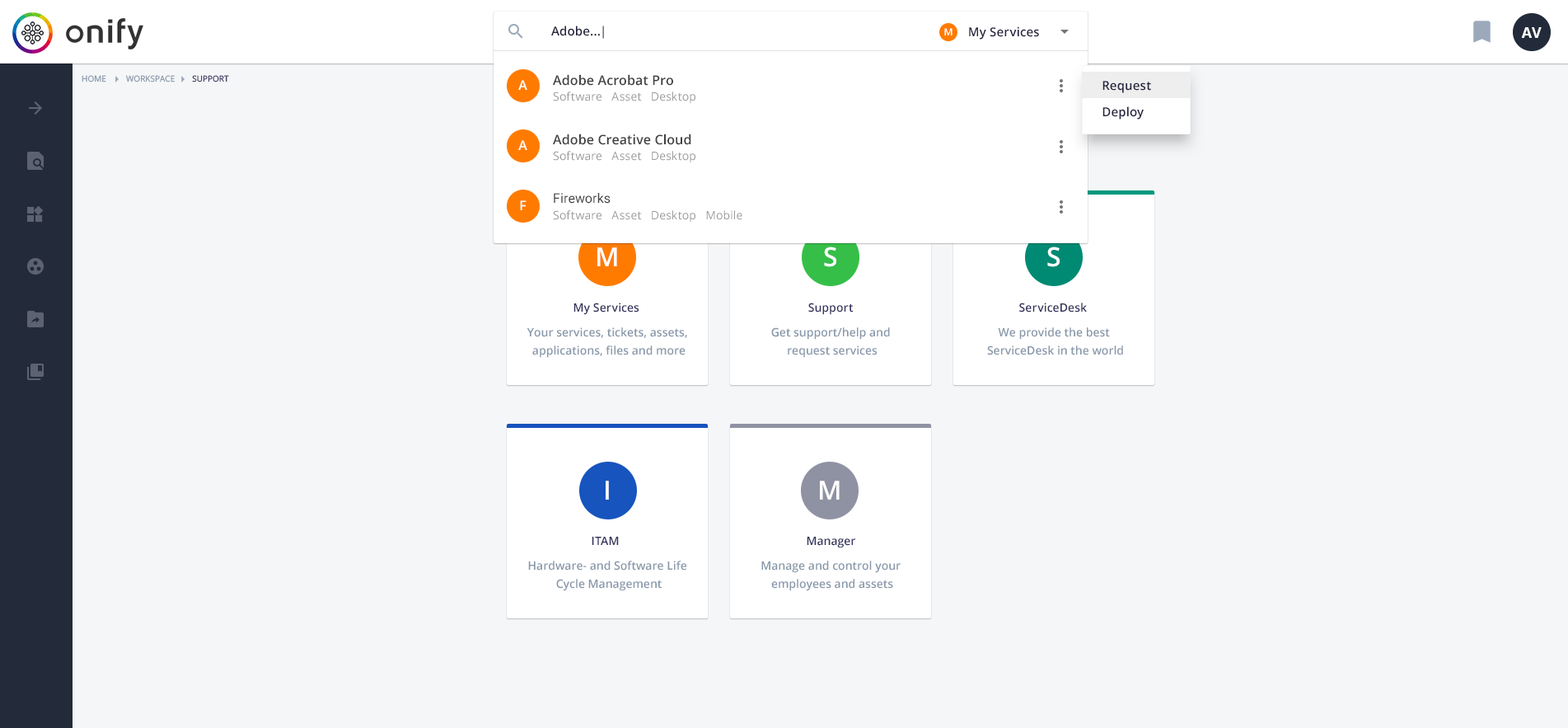
<style>
.page{position:relative;width:1568px;height:728px;background:#f5f6f8}
.page>*{position:absolute;margin:0}
.t1{font:12.4px "OpenSans-Semibold";letter-spacing:0.01em;color:#23233d}
.t2{font:9.9px "OpenSans-Semibold";letter-spacing:0.01em;color:#ffffff}
.t3{font:14.8px "OpenSans-Bold";color:#ffffff;text-transform:uppercase}
.t4{font:8.2px "OpenSans";color:#8898aa;text-transform:uppercase}
.t5{font:8.2px "OpenSans";color:#32325d;text-transform:uppercase}
.t6{font:13.2px "OpenSans-Semibold";letter-spacing:0.01em;color:#404040}
.t7{font:13.2px "OpenSans-Semibold";letter-spacing:0.01em;color:#ffffff}
.t8{font:11.5px "OpenSans";letter-spacing:0.01em;color:#9a9a9a}
.t9{font:13.2px "Roboto-Regular";letter-spacing:0.01em;color:#404040}
.t10{font:26.4px "OpenSans-Semibold";letter-spacing:0.005em;color:#ffffff}
.t11{font:11.5px "OpenSans-Semibold";letter-spacing:0.005em;color:#32325d}
.t12{font:11.5px/18.1px "OpenSans-Semibold";color:#8898aa}
</style>
<div class="page">
<p class="t1" style="left:551px;top:26px;width:53px;height:13px">Adobe...|</p>
<p class="t2" style="left:944px;top:28px;width:9px;height:7px">M</p>
<p class="t2" style="left:944px;top:28px;width:9px;height:7px">M</p>
<p class="t1" style="left:969px;top:26px;width:70px;height:14px">My Services</p>
<p class="t1" style="left:969px;top:26px;width:70px;height:14px">My Services</p>
<p class="t3" style="left:1521px;top:27px;width:21px;height:11px">AV</p>
<p class="t4" style="left:82px;top:75px;width:24px;height:7px">Home</p>
<p class="t4" style="left:126px;top:75px;width:49px;height:7px">Workspace</p>
<p class="t5" style="left:192px;top:75px;width:37px;height:7px">Support</p>
<p class="t6" style="left:553px;top:74px;width:120px;height:12px">Adobe Acrobat Pro</p>
<p class="t7" style="left:518px;top:80px;width:9px;height:10px">A</p>
<p class="t1" style="left:1102px;top:81px;width:49px;height:12px">Request</p>
<p class="t8" style="left:553px;top:91px;width:142px;height:13px">Software   Asset   Desktop</p>
<p class="t1" style="left:1102px;top:106px;width:42px;height:13px">Deploy</p>
<p class="t6" style="left:553px;top:133px;width:138px;height:12px">Adobe Creative Cloud</p>
<p class="t7" style="left:518px;top:140px;width:9px;height:10px">A</p>
<p class="t8" style="left:553px;top:151px;width:142px;height:12px">Software   Asset   Desktop</p>
<p class="t9" style="left:554px;top:193px;width:57px;height:11px">Fireworks</p>
<p class="t7" style="left:520px;top:200px;width:7px;height:10px">F</p>
<p class="t8" style="left:553px;top:210px;width:189px;height:12px">Software   Asset   Desktop   Mobile</p>
<p class="t10" style="left:597px;top:247px;width:20px;height:19px">M</p>
<p class="t10" style="left:824px;top:246px;width:12px;height:21px">S</p>
<p class="t10" style="left:1047px;top:246px;width:13px;height:21px">S</p>
<p class="t11" style="left:573px;top:302px;width:66px;height:13px">My Services</p>
<p class="t11" style="left:808px;top:302px;width:46px;height:13px">Support</p>
<p class="t11" style="left:1019px;top:302px;width:68px;height:10px">ServiceDesk</p>
<p class="t12" style="left:527px;top:327px;width:160px;height:31px;text-align:center">Your services, tickets, assets, <br>applications, files and more</p>
<p class="t12" style="left:771px;top:327px;width:119px;height:31px;text-align:center">Get support/help and <br>request services</p>
<p class="t12" style="left:987px;top:327px;width:136px;height:28px;text-align:center">We provide the best <br>ServiceDesk in the world</p>
<p class="t10" style="left:606px;top:480px;width:3px;height:19px">I</p>
<p class="t10" style="left:820px;top:480px;width:20px;height:19px">M</p>
<p class="t11" style="left:592px;top:536px;width:27px;height:9px">ITAM</p>
<p class="t11" style="left:807px;top:536px;width:48px;height:12px">Manager</p>
<p class="t12" style="left:528px;top:560px;width:158px;height:31px;text-align:center">Hardware- and Software Life <br>Cycle Management</p>
<p class="t12" style="left:761px;top:560px;width:140px;height:31px;text-align:center">Manage and control your <br>employees and assets</p>
</div>
